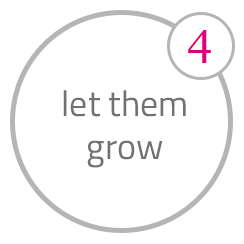
<style>
.page{position:relative;width:244px;height:244px;background:#ffffff}
.page>*{position:absolute;margin:0}
.t1{font:45px "Georgia";color:#e2007a}
.t2{font:36px "TitilliumWeb-Regular";color:#717171}
</style>
<div class="page">
<p class="t1" style="left:188px;top:30px;width:23px;height:33px">4</p>
<p class="t2" style="left:63px;top:90px;width:123px;height:78px;text-align:center">let them<br>grow</p>
</div>
